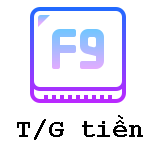
<style>
.page{position:relative;width:156px;height:156px;background:#ffffff}
.page>*{position:absolute;margin:0}
.t1{font:26px "CourierNewPS-BoldMT";color:#000000}
</style>
<div class="page">
<p class="t1" style="left:17px;top:115px;width:126px;height:25px">T/G tiền</p>
</div>
